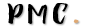
<style>
.page{position:relative;width:86px;height:28px;background:#ffffff}
.page>*{position:absolute;margin:0}
.t1{font:28px "Debby";letter-spacing:0.14em;color:#000000;scale:1.44 1}
.t2{font:28px "Debby";letter-spacing:0.14em;color:#dfa974;scale:1.44 1}
</style>
<div class="page">
<p class="t1" style="left:7px;top:3px;width:61px;height:21px">PMC</p>
<p class="t2" style="left:73px;top:19px;width:6px;height:4px">.</p>
</div>
